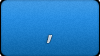
<style>
.page{position:relative;width:100px;height:56px}
.page>*{position:absolute;margin:0}
.t1{font:32px "MyriadPro-Regular";color:#c0d3e4}
</style>
<div class="page">
<p class="t1" style="left:47px;top:35px;width:5px;height:8px">,</p>
</div>
